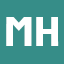
<style>
.page{position:relative;width:64px;height:64px;background:#368d88}
.page>*{position:absolute;margin:0}
.t1{font:40.9px "Staatliches-Regular";color:#ffffff;scale:1.36 1}
</style>
<div class="page">
<p class="t1" style="left:6px;top:17px;width:53px;height:29px">MH</p>
</div>
